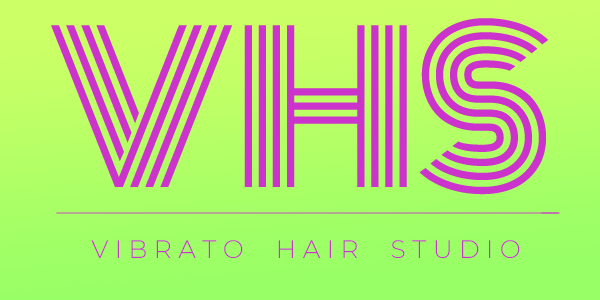
<style>
.page{position:relative;width:600px;height:300px}
.page>*{position:absolute;margin:0}
.t1{font:25px "Montserrat-Light";color:#cc33cc}
</style>
<div class="page">
<p class="t1" style="left:91px;top:240px;width:429px;height:19px">V I B R A T O     H A I R     S T U D I O</p>
</div>
